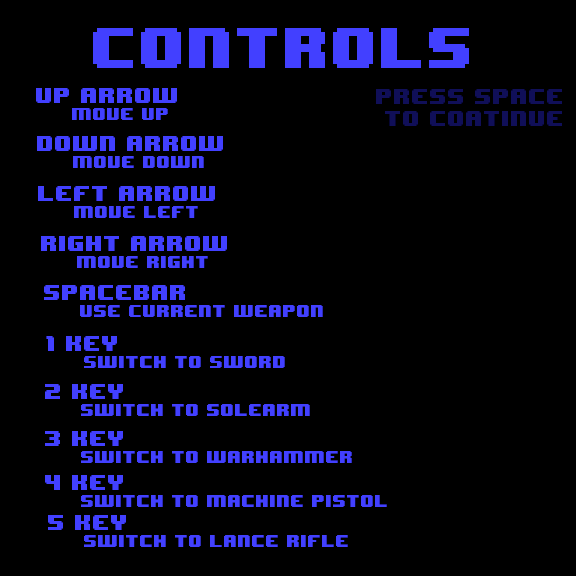
<style>
.page{position:relative;width:576px;height:576px;background:#000000}
.page>*{position:absolute;margin:0}
.t1{font:48px "8BITWONDERNominal";color:#4240ff}
.t2{font:18px "8BITWONDERNominal";color:#4240ff}
.t3{font:14px "8BITWONDERNominal";color:#4240ff}
.t4{font:18px "8BITWONDERNominal";color:#100f58}
</style>
<div class="page">
<p class="t1" style="left:93px;top:28px;width:376px;height:40px">Controls</p>
<p class="t2" style="left:36px;top:88px;width:141px;height:32px">Up Arrow<br><span class="t3"> Move Up</span></p>
<p class="t4" style="left:376px;top:89px;width:186px;height:37px;text-align:center">Press Space <br>to Coatinue</p>
<p class="t2" style="left:37px;top:136px;width:186px;height:32px">Down Arrow<br><span class="t3"> Move down</span></p>
<p class="t2" style="left:38px;top:186px;width:177px;height:32px">Left Arrow<br><span class="t3"> move left</span></p>
<p class="t2" style="left:41px;top:236px;width:186px;height:32px">Right arrow<br><span class="t3"> move right</span></p>
<p class="t3" style="left:44px;top:285px;width:279px;height:32px"><span class="t2">Spacebar<br></span> use Current Weapon</p>
<p class="t3" style="left:46px;top:336px;width:239px;height:32px"><span class="t2">1 key<br></span> Switch to Sword</p>
<p class="t3" style="left:45px;top:384px;width:265px;height:32px"><span class="t2">2 key<br></span> switch to solearm</p>
<p class="t3" style="left:45px;top:431px;width:307px;height:32px"><span class="t2">3 key<br></span> switch to warhammer</p>
<p class="t3" style="left:45px;top:475px;width:342px;height:32px"><span class="t2">4 key<br></span> switch to machine pistol</p>
<p class="t3" style="left:48px;top:515px;width:300px;height:32px"><span class="t2">5 key<br></span> switch to Lance rifle</p>
</div>
